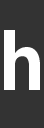
<style>
.page{position:relative;width:44px;height:128px;background:#333333}
.page>*{position:absolute;margin:0}
.t1{font:75px "AdobeGothicStd-Bold";color:#ffffff}
</style>
<div class="page">
<p class="t1" style="left:4px;top:30px;width:36px;height:60px">h</p>
</div>
